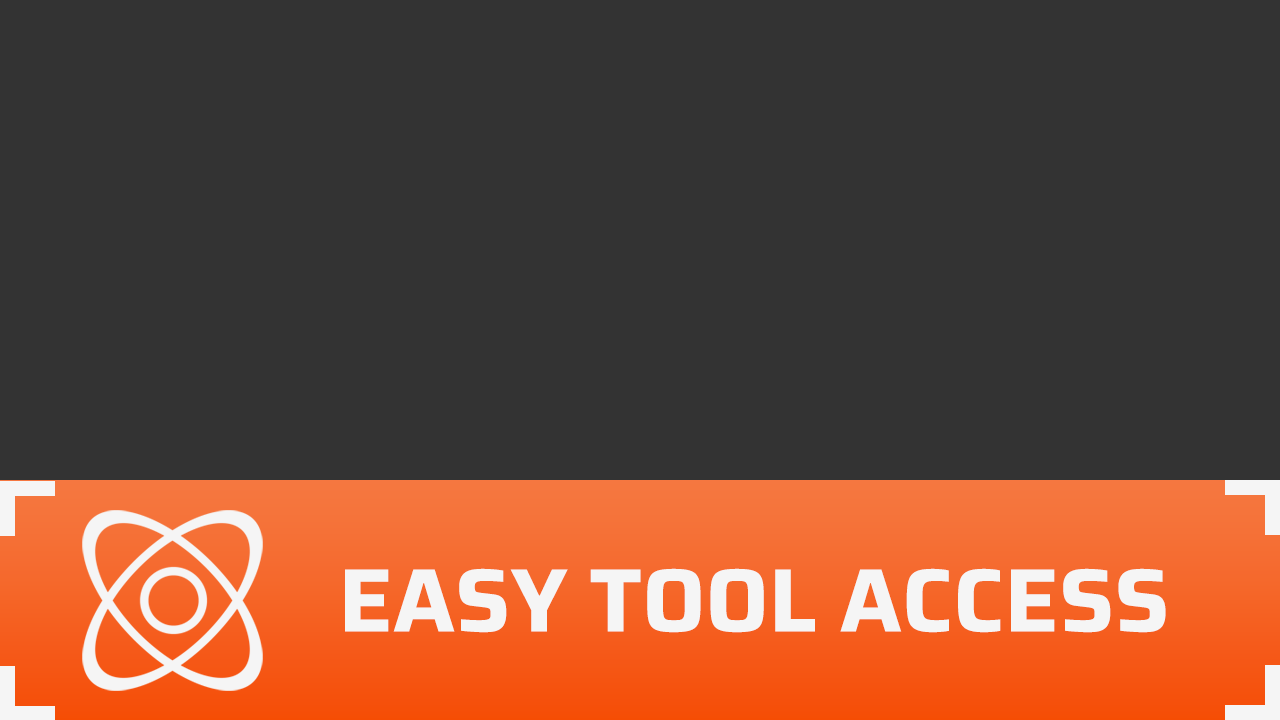
<style>
.page{position:relative;width:1280px;height:720px;background:#333333}
.page>*{position:absolute;margin:0}
.t1{font:90px "SairaRoman-Bold";color:#ffffff;font-weight:bold}
</style>
<div class="page">
<p class="t1" style="left:345px;top:568px;width:821px;height:65px">EASY TOOL ACCESS</p>
</div>
